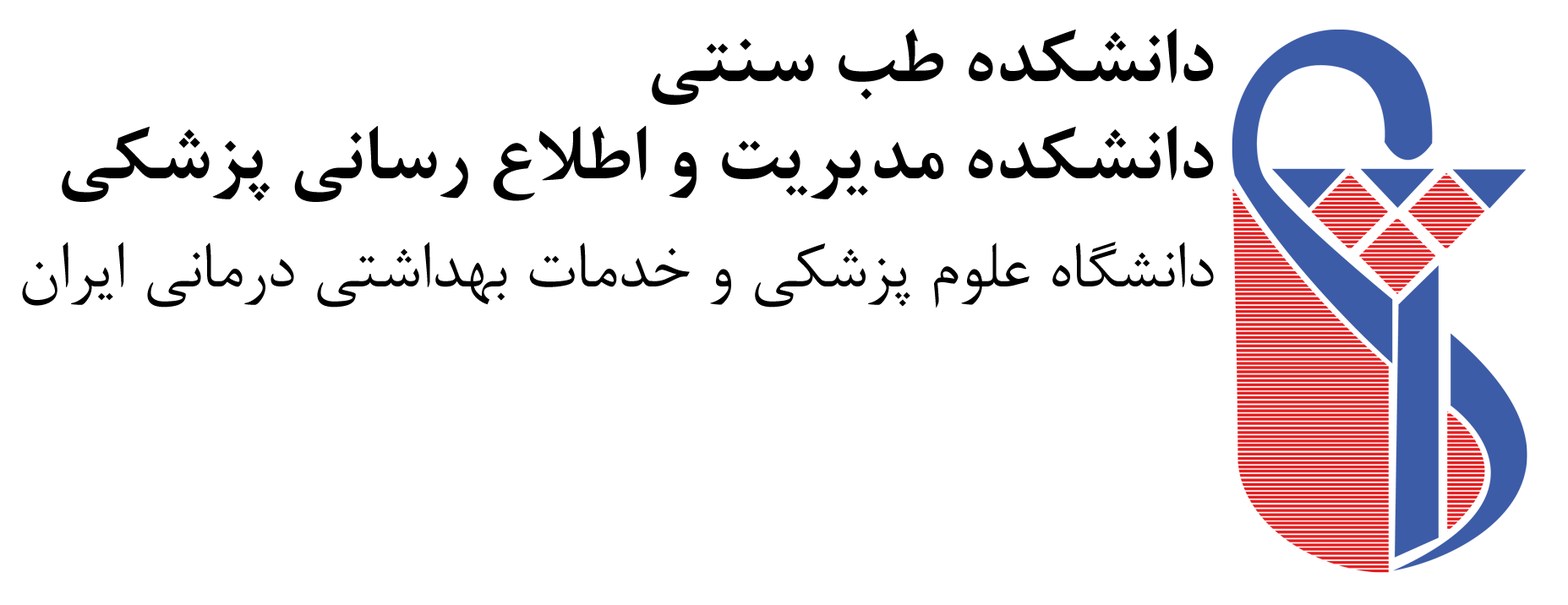
<style>
.page{position:relative;width:1568px;height:605px;background:#ffffff}
.page>*{position:absolute;margin:0}
.t1{font:84.5px "BNazaninBold";color:#000000}
.t2{font:74.4px "BNazanin";color:#000000}
</style>
<div class="page">
<p class="t1" style="left:652px;top:29px;width:562px;height:76px">دانشکده طب سنتی</p>
<p class="t1" style="left:62px;top:126px;width:1152px;height:76px">دانشکده مدیریت و اطلاع رسانی پزشکی</p>
<p class="t2" style="left:22px;top:242px;width:1192px;height:66px">دانشگاه علوم پزشکی و خدمات بهداشتی درمانی ایران</p>
</div>
